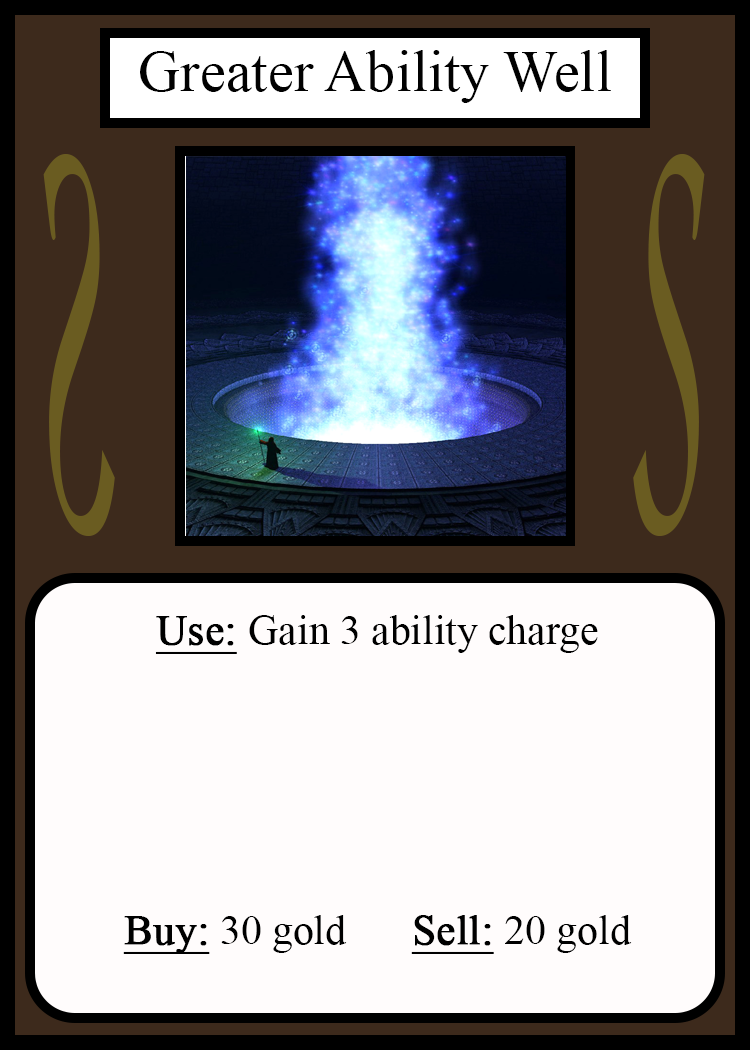
<style>
.page{position:relative;width:750px;height:1050px;background:#fffcfc}
.page>*{position:absolute;margin:0}
.t1{font:58.3px "TimesNewRomanPSMT";color:#010101}
.t2{font:548.5px "Apple-Chancery";color:#6a5c21;scale:0.27 1}
.t3{font:548.2px "Apple-Chancery";color:#6a5c21;scale:0.27 1}
.t4{font:41.7px "TimesNewRomanPSMT";color:#000000}
.t5{font:41.7px "TimesNewRomanPSMT";color:#000000;font-weight:bold;text-decoration:underline}
</style>
<div class="page">
<p class="t1" style="left:140px;top:50px;width:471px;height:53px">Greater Ability Well</p>
<p class="t2" style="left:43px;top:154px;width:72px;height:382px;rotate:180deg">S</p>
<p class="t3" style="left:633px;top:154px;width:72px;height:382px">S</p>
<p class="t4" style="left:123px;top:615px;width:509px;height:339px;text-align:center"><span class="t5">Use: </span>Gain 3 ability charge<br><br><br><br><br><br><span class="t5">Buy:</span> 30 gold   <span class="t5">Sell:</span> 20 gold</p>
</div>
